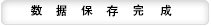
<style>
.page{position:relative;width:211px;height:26px;background:#ffffff}
.page>*{position:absolute;margin:0}
.t1{font:12px "AdobeHeitiStd-Regular";color:#000000}
</style>
<div class="page">
<p class="t1" style="left:30px;top:4px;width:142px;height:13px">数     据     保     存     完      成</p>
</div>
